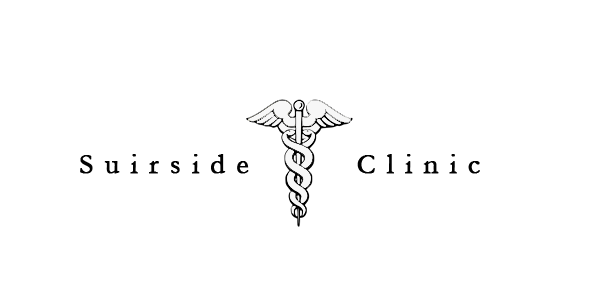
<style>
.page{position:relative;width:600px;height:300px;background:#ffffff}
.page>*{position:absolute;margin:0}
.t1{font:29.4px "Garamond";letter-spacing:0.36em;color:#020202;font-weight:bold}
</style>
<div class="page">
<p class="t1" style="left:80px;top:154px;width:169px;height:20px">Suirside</p>
<p class="t1" style="left:357px;top:154px;width:123px;height:20px">Clinic</p>
</div>
